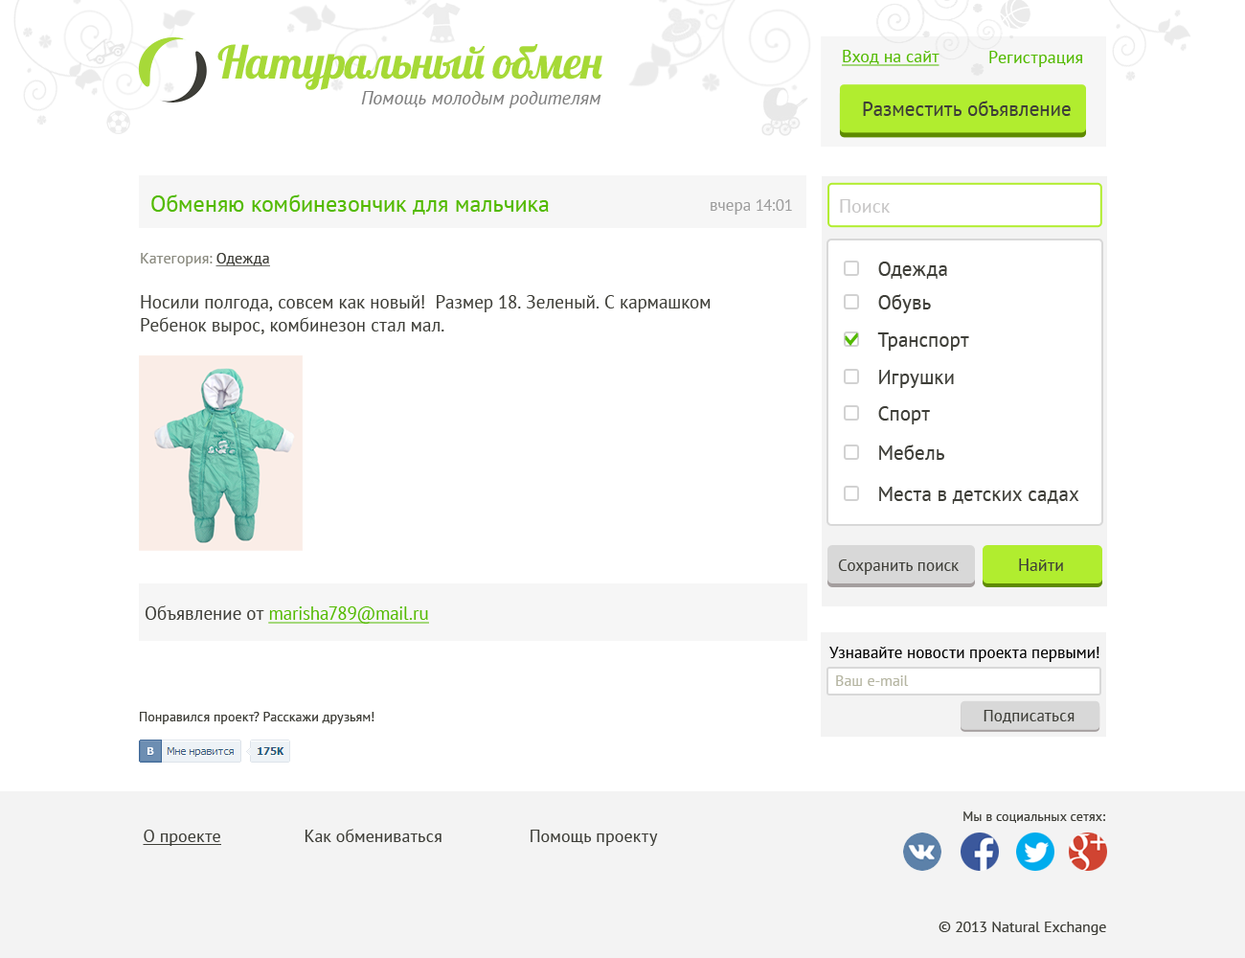
<style>
.page{position:relative;width:1245px;height:958px;background:#ffffff}
.page>*{position:absolute;margin:0}
.t1{font:45.4px "Lobster";letter-spacing:-0.08em;color:#a6d937}
.t2{font:17.2px "PTSans-Regular";color:#53ba00;text-decoration:underline}
.t3{font:17.2px "PTSans-Regular";color:#53ba00}
.t4{font:19.2px "PTSans-Italic";color:#7f7f7f}
.t5{font:20.1px "PTSans-Regular";color:#3e3e38}
.t6{font:23px "PTSans-Regular";color:#53ba00}
.t7{font:16.3px "PTSans-Regular";color:#9c9c9c}
.t8{font:19.2px "PTSans-Regular";color:#c7c6c6}
.t9{font:15.3px "PTSans-Regular";color:#8b8b80}
.t10{font:15.3px "PTSans-Regular";color:#3e3e38;text-decoration:underline}
.t11{font:18.2px/23px "PTSans-Regular";color:#3e3e38}
.t12{font:16.3px "PTSans-Regular";color:#3e3e38}
.t13{font:17.2px "PTSans-Regular";color:#3e3e38}
.t14{font:18.2px "PTSans-Regular";color:#53ba00;text-decoration:underline}
.t15{font:18.2px "PTSans-Regular";color:#3e3e38}
.t16{font:16.3px "PTSans-Regular";color:#000000}
.t17{font:15.3px "PTSans-Regular";color:#b6b6a3}
.t18{font:13.4px "PTSans-Regular";color:#3e3e38}
.t19{font:17.2px "PTSans-Regular";color:#3e3e38;text-decoration:underline}
.t20{font:15.3px "PTSans-Regular";color:#3e3e38}
</style>
<div class="page">
<p class="t1" style="left:217px;top:44px;width:385px;height:46px">Натуральный  обмен</p>
<p class="t2" style="left:842px;top:50px;width:98px;height:16px">Вход на сайт</p>
<p class="t3" style="left:989px;top:51px;width:93px;height:16px">Регистрация</p>
<p class="t4" style="left:361px;top:91px;width:240px;height:17px">Помощь молодым родителям</p>
<p class="t5" style="left:863px;top:101px;width:208px;height:15px">Разместить объявление</p>
<p class="t6" style="left:151px;top:194px;width:398px;height:21px">Обменяю комбинезончик для мальчика</p>
<p class="t7" style="left:711px;top:199px;width:81px;height:16px">вчера 14:01</p>
<p class="t8" style="left:840px;top:199px;width:51px;height:14px">Поиск</p>
<p class="t9" style="left:141px;top:253px;width:129px;height:13px">Категория: <span class="t10">Одежда</span></p>
<p class="t5" style="left:878px;top:261px;width:69px;height:18px">Одежда</p>
<p class="t11" style="left:141px;top:295px;width:570px;height:40px">Носили полгода, совсем как новый!  Размер 18. Зеленый. С кармашком<br>Ребенок вырос, комбинезон стал мал.</p>
<p class="t5" style="left:878px;top:294px;width:53px;height:19px">Обувь</p>
<p class="t5" style="left:877px;top:332px;width:92px;height:19px">Транспорт</p>
<p class="t5" style="left:879px;top:370px;width:75px;height:18px">Игрушки</p>
<p class="t5" style="left:878px;top:406px;width:52px;height:18px">Спорт</p>
<p class="t5" style="left:879px;top:444px;width:65px;height:16px">Мебель</p>
<p class="t5" style="left:879px;top:487px;width:200px;height:17px">Места в детских садах</p>
<p class="t12" style="left:838px;top:559px;width:121px;height:16px">Сохранить поиск</p>
<p class="t13" style="left:1019px;top:558px;width:44px;height:13px">Найти</p>
<p class="t14" style="left:146px;top:605px;width:283px;height:18px"><span class="t15">Объявление от </span>marisha789@mail.ru</p>
<p class="t16" style="left:829px;top:646px;width:270px;height:16px">Узнавайте новости проекта первыми!</p>
<p class="t17" style="left:836px;top:675px;width:73px;height:11px">Ваш e-mail</p>
<p class="t18" style="left:140px;top:712px;width:234px;height:12px">Понравился проект? Расскажи друзьям!</p>
<p class="t12" style="left:984px;top:710px;width:91px;height:13px">Подписаться</p>
<p class="t18" style="left:963px;top:811px;width:142px;height:12px">Мы в социальных сетях:</p>
<p class="t13" style="left:143px;top:828px;width:515px;height:18px"><span class="t19">О проекте</span>       Как обмениваться            Помощь  проекту</p>
<p class="t20" style="left:939px;top:921px;width:167px;height:14px">© 2013 Natural Exchange</p>
</div>
